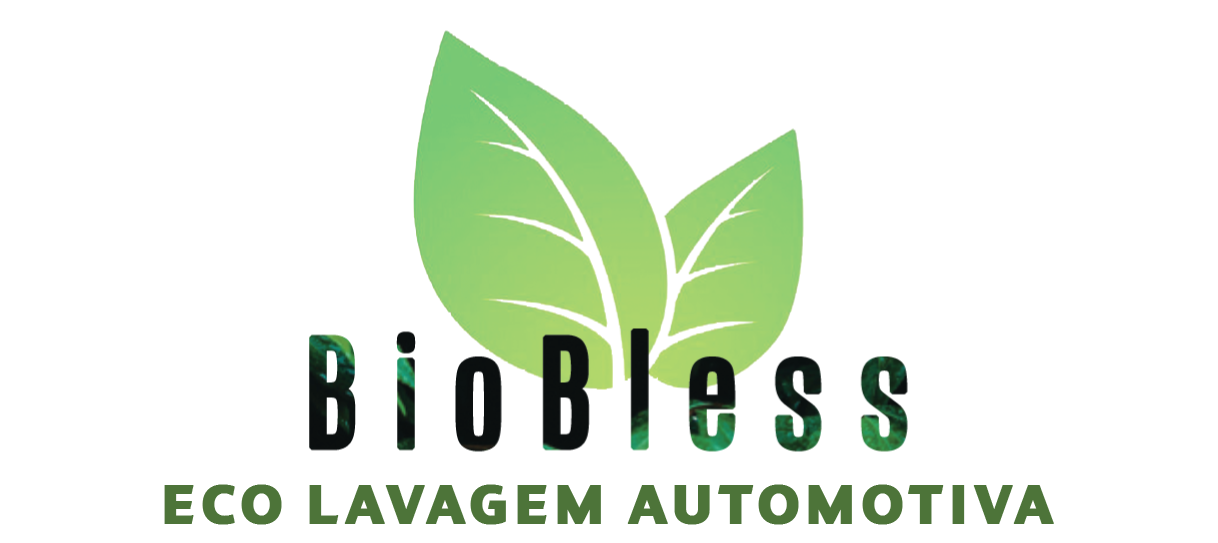
<style>
.page{position:relative;width:1218px;height:543px;background:#ffffff}
.page>*{position:absolute;margin:0}
.t1{font:53.2px "Evander-ExtraBold";letter-spacing:0.05em;color:#4d7439;font-weight:bold;scale:1.03 1}
</style>
<div class="page">
<p class="t1" style="left:164px;top:484px;width:890px;height:41px">ECO LAVAGEM AUTOMOTIVA</p>
</div>
